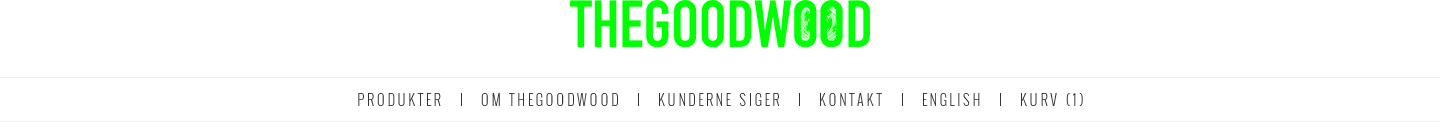
<style>
.page{position:relative;width:1440px;height:122px;background:#ffffff}
.page>*{position:absolute;margin:0}
.t1{font:14px "Oswald-Light";letter-spacing:0.2em;color:#333333;text-transform:uppercase}
</style>
<div class="page">
<p class="t1" style="left:358px;top:93px;width:83px;height:13px">Produkter</p>
<p class="t1" style="left:481px;top:93px;width:137px;height:13px">Om thegoodwood</p>
<p class="t1" style="left:659px;top:93px;width:121px;height:13px">Kunderne siger</p>
<p class="t1" style="left:820px;top:93px;width:62px;height:13px">Kontakt</p>
<p class="t1" style="left:923px;top:93px;width:57px;height:13px">English</p>
<p class="t1" style="left:1021px;top:93px;width:62px;height:13px">Kurv (1)</p>
</div>
